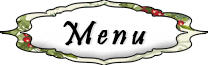
<style>
.page{position:relative;width:208px;height:65px;background:#ffffff}
.page>*{position:absolute;margin:0}
.t1{font:34px "Pristina-Regular";letter-spacing:0.125em;color:#000000;font-weight:bold}
.t2{font:34px "Pristina-Regular";letter-spacing:0.125em;font-weight:bold}
</style>
<div class="page">
<p class="t1" style="left:63px;top:21px;width:83px;height:25px">Menu</p>
<p class="t2" style="left:65px;top:21px;width:83px;height:25px">Menu</p>
</div>
